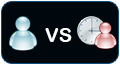
<style>
.page{position:relative;width:120px;height:65px;background:#00080e}
.page>*{position:absolute;margin:0}
.t1{font:20px "ArialRoundedMTBold";color:#ffffff}
</style>
<div class="page">
<p class="t1" style="left:45px;top:28px;width:27px;height:14px">VS</p>
</div>
